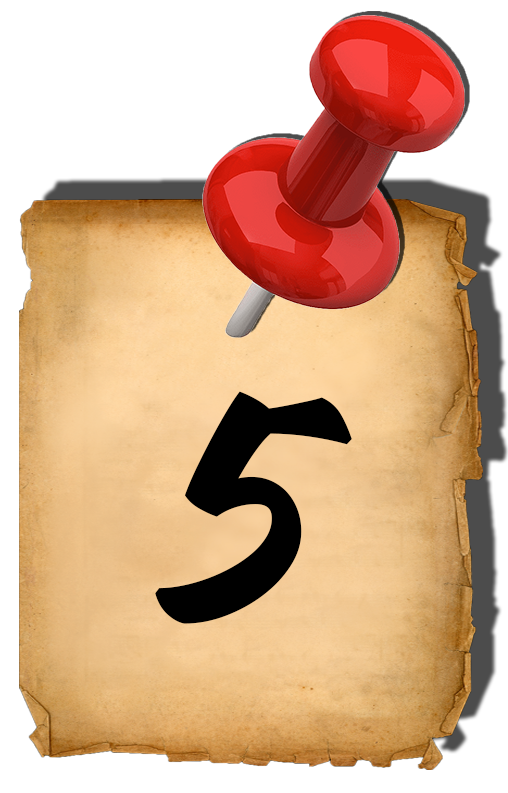
<style>
.page{position:relative;width:508px;height:793px;background:#ffffff}
.page>*{position:absolute;margin:0}
.t1{font:300px "Sweet-Mavka-Script";color:#000000;font-weight:bold}
</style>
<div class="page">
<p class="t1" style="left:155px;top:391px;width:197px;height:233px">5</p>
</div>
